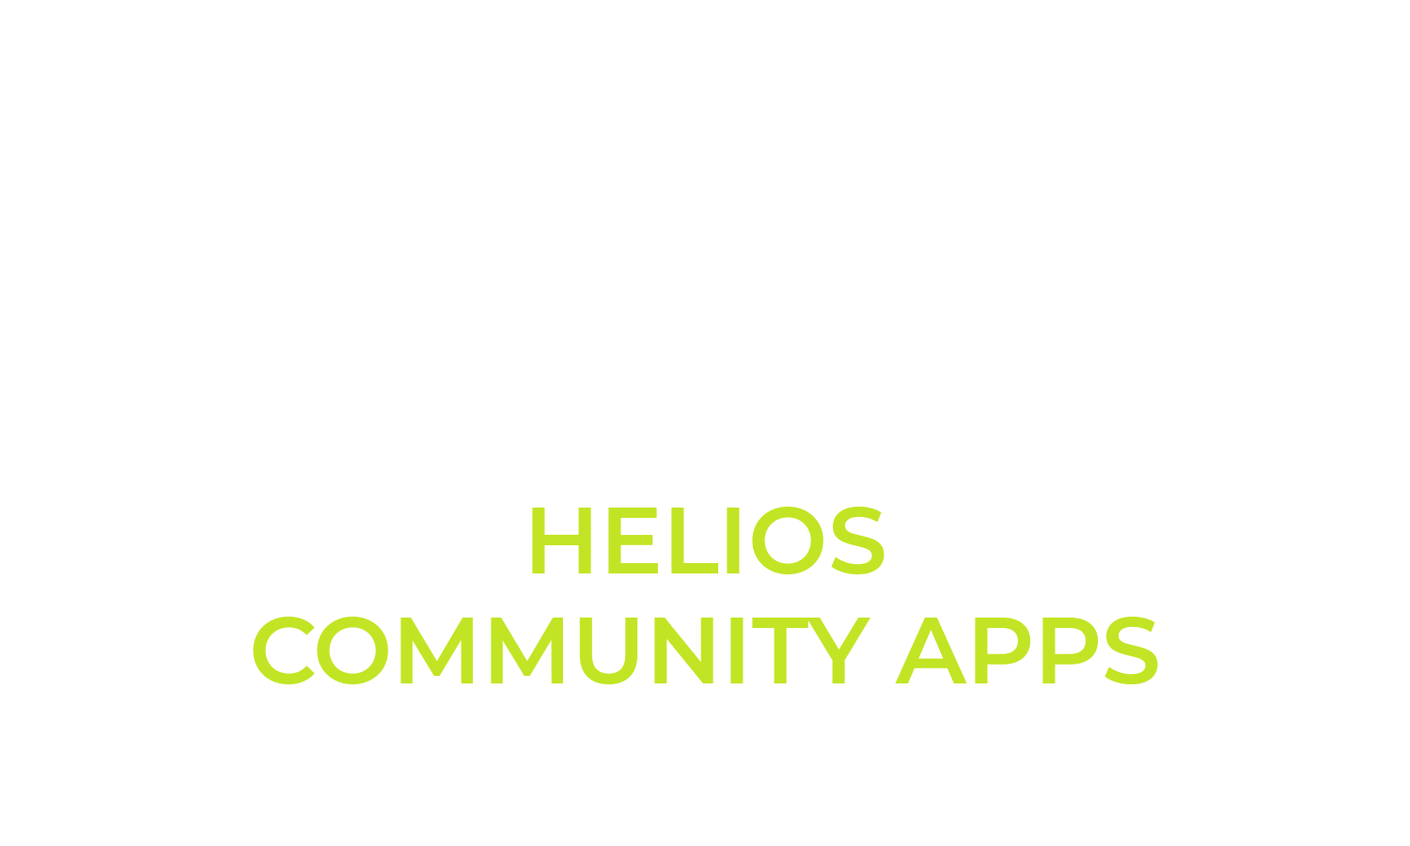
<style>
.page{position:relative;width:1410px;height:846px;background:#ffffff}
.page>*{position:absolute;margin:0}
.t1{font:94px/0.2px "Montserrat-SemiBold";color:#c1e524;text-transform:uppercase}
</style>
<div class="page">
<p class="t1" style="left:253px;top:507px;width:905px;height:177px;text-align:center">HELIOS<br>COMMUNITY APPS</p>
</div>
